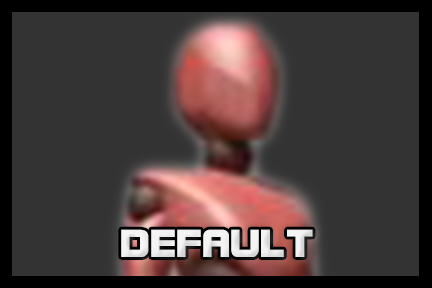
<style>
.page{position:relative;width:432px;height:288px;background:#333333}
.page>*{position:absolute;margin:0}
.t1{font:41.7px "BolsterBold";color:#f3f3f3}
</style>
<div class="page">
<p class="t1" style="left:121px;top:229px;width:192px;height:28px">DEFAULT</p>
</div>
